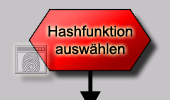
<style>
.page{position:relative;width:170px;height:100px;background:#c6c3c6}
.page>*{position:absolute;margin:0}
.t1{font:14.7px "ArialMT";color:#000000}
</style>
<div class="page">
<p class="t1" style="left:48px;top:25px;width:85px;height:30px;text-align:center">Hashfunktion<br>auswählen</p>
</div>
